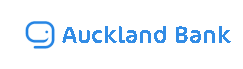
<style>
.page{position:relative;width:243px;height:69px;background:#ffffff}
.page>*{position:absolute;margin:0}
.t1{font:24px "Cocon-Regular";color:#328ce5}
</style>
<div class="page">
<p class="t1" style="left:62px;top:26px;width:169px;height:17px">Auckland Bank</p>
</div>
